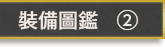
<style>
.page{position:relative;width:165px;height:47px;background:#3e3e3e}
.page>*{position:absolute;margin:0}
.t1{font:20px "GothicMB101Pr6N-Medium";color:#f2ebe5}
</style>
<div class="page">
<p class="t1" style="left:18px;top:11px;width:80px;height:19px">裝備圖鑑</p>
</div>
